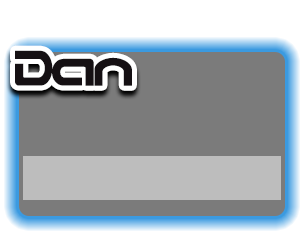
<style>
.page{position:relative;width:300px;height:240px;background:#7b7b7b}
.page>*{position:absolute;margin:0}
.t1{font:60px "NicoKaku";letter-spacing:-0.1em;color:#151013}
</style>
<div class="page">
<p class="t1" style="left:15px;top:50px;width:117px;height:36px">Dan</p>
</div>
